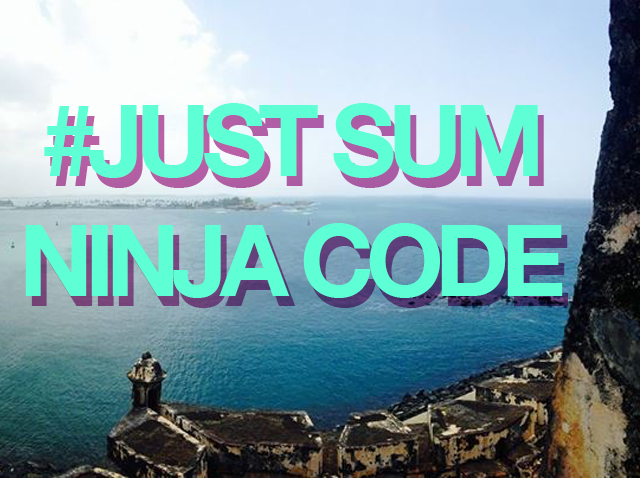
<style>
.page{position:relative;width:640px;height:478px}
.page>*{position:absolute;margin:0}
.t1{font:99.7px "HelveticaNeue-Bold";letter-spacing:-0.08em;color:#5effd4}
</style>
<div class="page">
<p class="t1" style="left:25px;top:103px;width:538px;height:195px;text-align:center">#JUST SUM<br>NINJA CODE</p>
</div>
